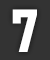
<style>
.page{position:relative;width:50px;height:60px;background:#333333}
.page>*{position:absolute;margin:0}
.t1{font:60px "Bahnschrift-Bold";color:#ffffff}
</style>
<div class="page">
<p class="t1" style="left:12px;top:9px;width:25px;height:43px">7</p>
</div>
